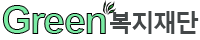
<style>
.page{position:relative;width:200px;height:40px;background:#ffffff}
.page>*{position:absolute;margin:0}
.t1{font:40px "Arial-BoldMT";letter-spacing:-0.05em}
.t2{font:24px "MalgunGothicBold";letter-spacing:-0.075em;color:#434748}
</style>
<div class="page">
<p class="t1" style="left:2px;top:5px;width:104px;height:29px">Green</p>
<p class="t2" style="left:110px;top:11px;width:89px;height:23px">복지재단</p>
</div>
